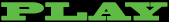
<style>
.page{position:relative;width:169px;height:22px;background:#5fbb46}
.page>*{position:absolute;margin:0}
.t1{font:24px "BlackoakStd";color:#5fbb46}
</style>
<div class="page">
<p class="t1" style="left:1px;top:2px;width:167px;height:19px">PLAY</p>
</div>
